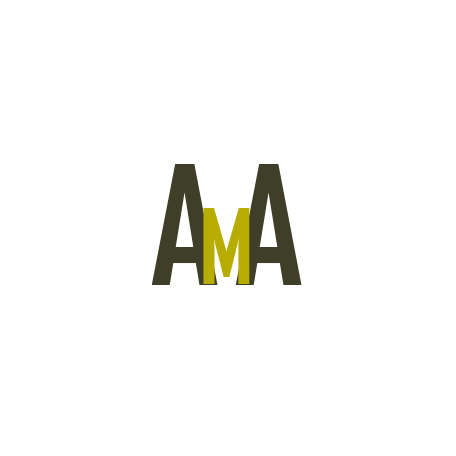
<style>
.page{position:relative;width:456px;height:456px;background:#ffffff}
.page>*{position:absolute;margin:0}
.t1{font:158px "AgencyFB-Bold";color:#3f3e29}
.t2{font:99px "AgencyFB-Bold";color:#b7ac01}
</style>
<div class="page">
<p class="t1" style="left:151px;top:164px;width:67px;height:121px">A</p>
<p class="t1" style="left:235px;top:164px;width:67px;height:121px">A</p>
<p class="t2" style="left:203px;top:208px;width:47px;height:76px">M</p>
</div>
